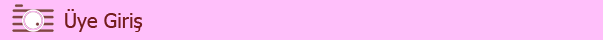
<style>
.page{position:relative;width:603px;height:40px;background:#ffbffa}
.page>*{position:absolute;margin:0}
.t1{font:20px "Tahoma";color:#731c1c}
</style>
<div class="page">
<p class="t1" style="left:65px;top:9px;width:78px;height:23px">Üye Giriş</p>
</div>
